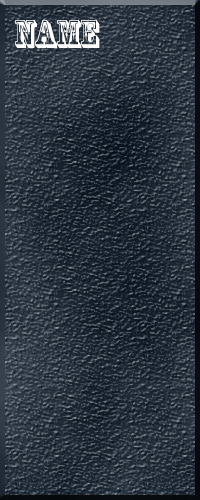
<style>
.page{position:relative;width:200px;height:500px}
.page>*{position:absolute;margin:0}
.t1{font:36px "RosewoodStd-Regular";color:#ffffff}
</style>
<div class="page">
<p class="t1" style="left:15px;top:20px;width:85px;height:28px">Name</p>
</div>
